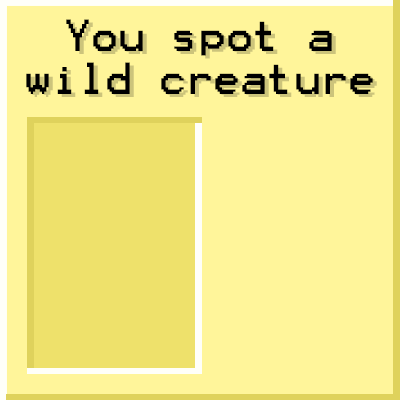
<style>
.page{position:relative;width:400px;height:400px;background:#fff59a}
.page>*{position:absolute;margin:0}
.t1{font:36px "Terminal";color:#000000}
</style>
<div class="page">
<p class="t1" style="left:26px;top:19px;width:347px;height:75px;text-align:center">You spot a<br>wild creature</p>
</div>
